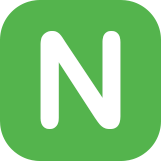
<style>
.page{position:relative;width:161px;height:161px;background:#54b44d}
.page>*{position:absolute;margin:0}
.t1{font:132.1px "ArialRoundedMTBold";color:#ffffff}
</style>
<div class="page">
<p class="t1" style="left:40px;top:31px;width:81px;height:98px">N</p>
</div>
